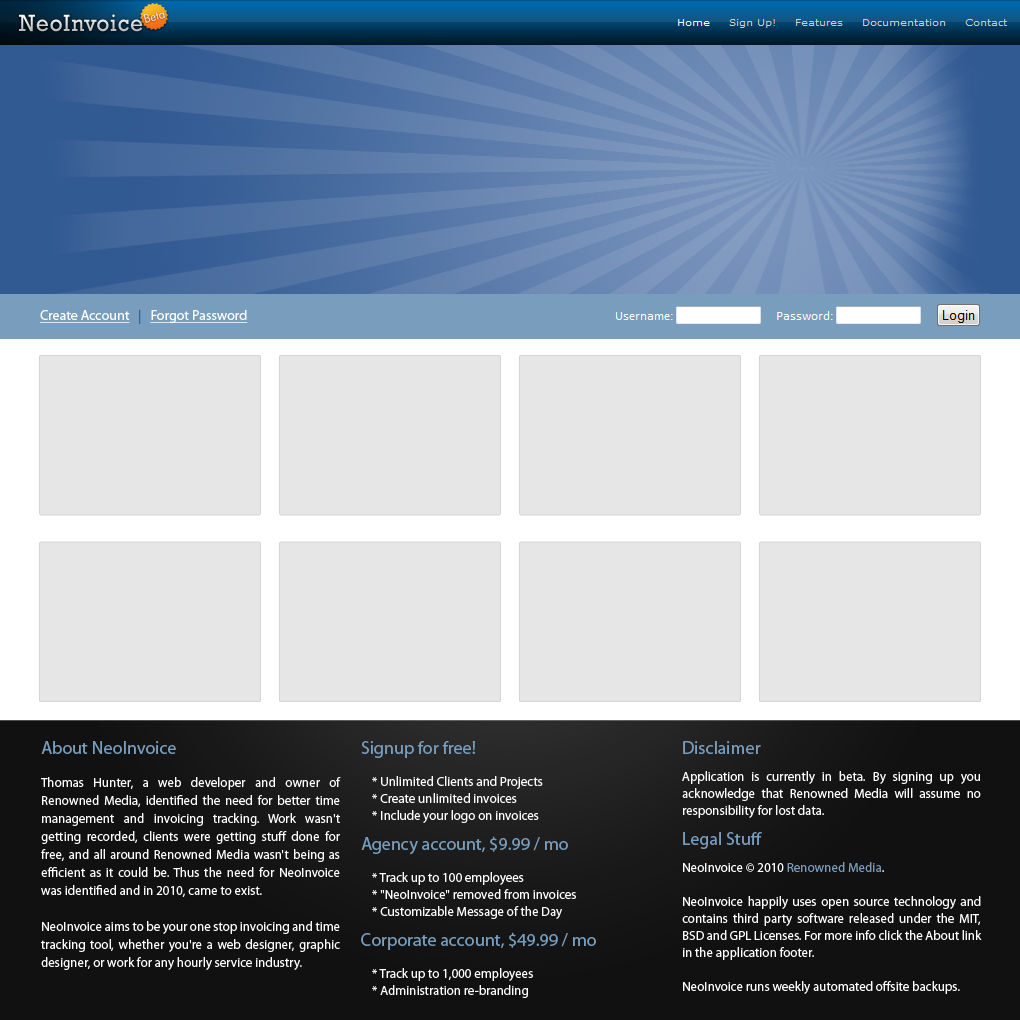
<style>
.page{position:relative;width:1020px;height:1020px;background:#e6e6e6}
.page>*{position:absolute;margin:0}
.t1{font:14px "MyriadPro-Regular";color:#ffffff;text-decoration:underline}
.t2{font:14px "MyriadPro-Regular";color:#316692}
.t3{font:13px/18px "MyriadPro-Regular";color:#ffffff}
.t4{font:18px/24px "MyriadPro-Regular";color:#799dbd}
.t5{font:13px/17px "MyriadPro-Regular";color:#ffffff}
.t6{font:18px/15px "MyriadPro-Regular";color:#799dbd}
.t7{font:13px/17px "MyriadPro-Regular";color:#799dbd}
</style>
<div class="page">
<p class="t1" style="left:40px;top:309px;width:208px;height:15px">Create Account<span class="t2">   |   </span>Forgot Password</p>
<p class="t3" style="left:41px;top:741px;width:300px;height:229px;text-align:justify"><span class="t4">About NeoInvoice<br><br></span>Thomas Hunter, a web developer and owner of Renowned Media, identified the need for better time management and invoicing tracking. Work wasn't getting recorded, clients were getting stuff done for free, and all around Renowned Media wasn't being as efficient as it could be. Thus the need for NeoInvoice was identified and in 2010, came to exist.<br><br>NeoInvoice aims to be your one stop invoicing and time tracking tool, whether you're a web designer, graphic designer, or work for any hourly service industry.</p>
<p class="t5" style="left:361px;top:741px;width:235px;height:257px;text-align:justify"><span class="t6">Signup for free!<br><br></span>    * Unlimited Clients and Projects<br>    * Create unlimited invoices<br>    * Include your logo on invoices<br><br><span class="t6">Agency account, $9.99 / mo<br><br></span>    * Track up to 100 employees<br>    * "NeoInvoice" removed from invoices<br>    * Customizable Message of the Day<br><br><span class="t6">Corporate account, $49.99 / mo<br><br></span>    * Track up to 1,000 employees<br>    * Administration re-branding</p>
<p class="t5" style="left:682px;top:741px;width:300px;height:253px;text-align:justify"><span class="t6">Disclaimer<br><br></span>Application is currently in beta. By signing up you acknowledge that Renowned Media will assume no responsibility for lost data.<br><br><span class="t6">Legal Stuff<br><br></span>NeoInvoice © 2010 <span class="t7">Renowned Media</span>.<br><br>NeoInvoice happily uses open source technology and contains third party software released under the MIT, BSD and GPL Licenses. For more info click the About link in the application footer.<br><br>NeoInvoice runs weekly automated offsite backups.</p>
</div>
